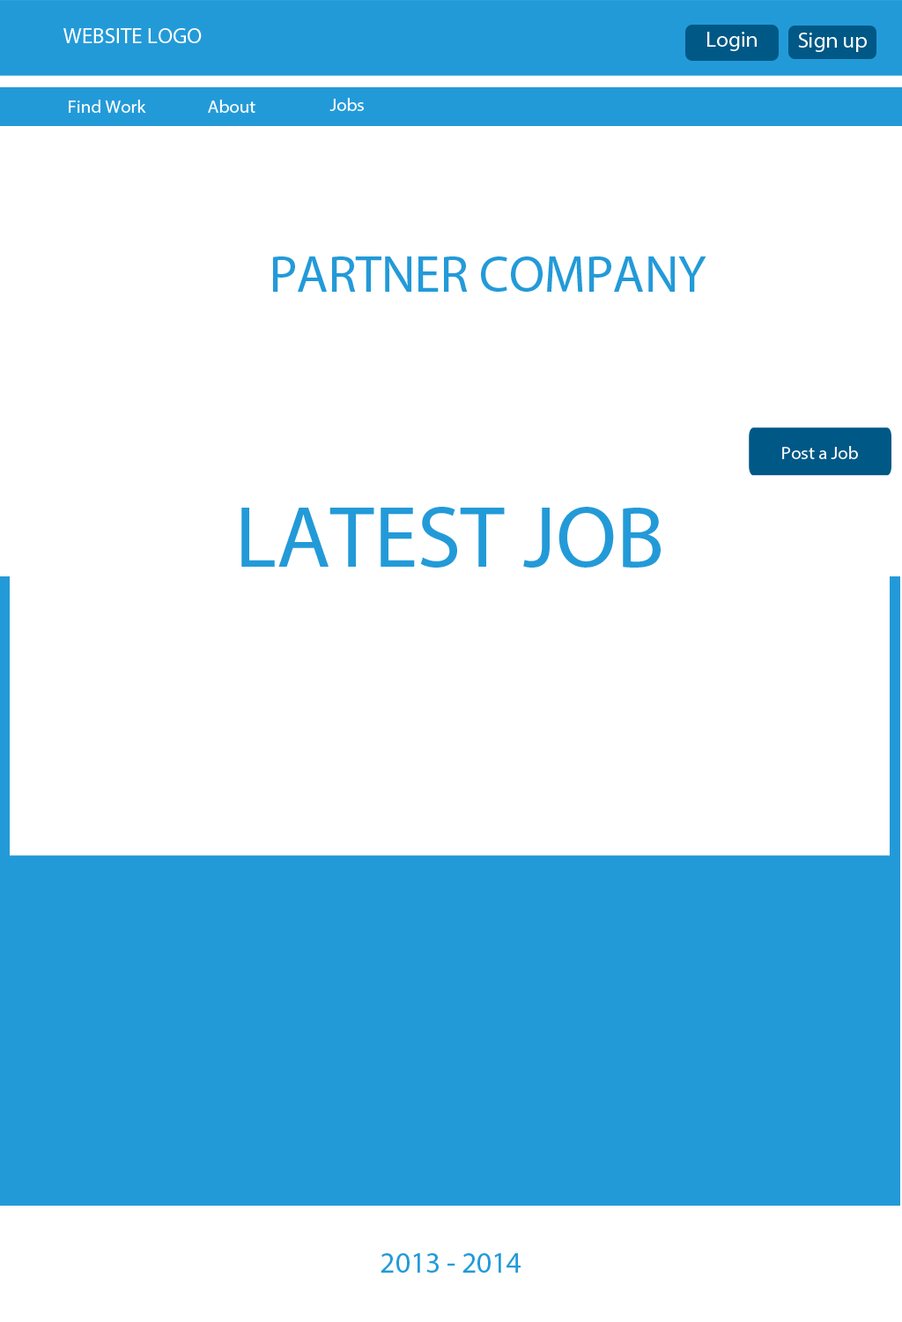
<style>
.page{position:relative;width:902px;height:1322px;background:#ffffff}
.page>*{position:absolute;margin:0}
.t1{font:22px "MyriadPro-Regular";color:#ffffff}
.t2{font:18.4px "MyriadPro-Regular";color:#ffffff}
.t3{font:51.4px "MyriadPro-Regular";color:#239ad8}
.t4{font:88.1px "MyriadPro-Regular";color:#239ad8}
.t5{font:29.4px "MyriadPro-Regular";color:#239ad8}
</style>
<div class="page">
<p class="t1" style="left:63px;top:28px;width:139px;height:15px">WEBSITE LOGO</p>
<p class="t1" style="left:708px;top:32px;width:49px;height:19px">Login</p>
<p class="t1" style="left:798px;top:33px;width:69px;height:19px">Sign up</p>
<p class="t2" style="left:69px;top:100px;width:77px;height:13px">Find Work</p>
<p class="t2" style="left:208px;top:100px;width:48px;height:13px">About</p>
<p class="t2" style="left:330px;top:98px;width:34px;height:13px">Jobs</p>
<p class="t3" style="left:273px;top:256px;width:434px;height:36px">PARTNER COMPANY</p>
<p class="t2" style="left:782px;top:446px;width:76px;height:13px">Post a Job</p>
<p class="t4" style="left:241px;top:507px;width:420px;height:60px">LATEST JOB</p>
<p class="t5" style="left:381px;top:1253px;width:140px;height:19px">2013 - 2014</p>
</div>
